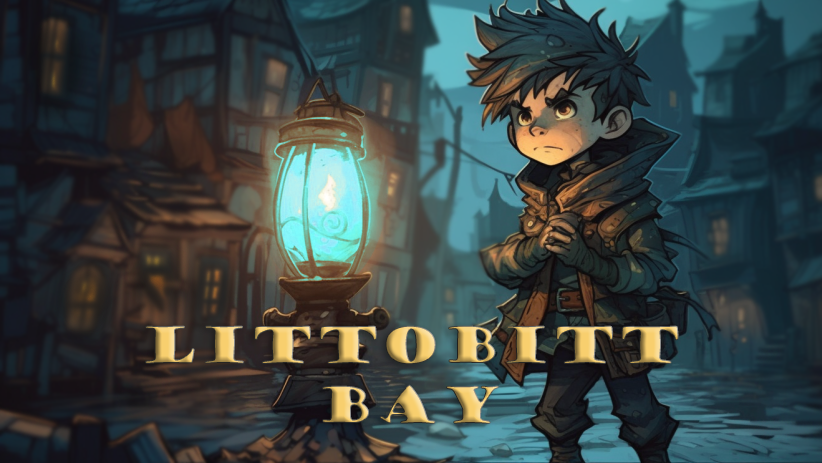
<style>
.page{position:relative;width:822px;height:463px}
.page>*{position:absolute;margin:0}
.t1{font:50px "GoudyStout"}
</style>
<div class="page">
<p class="t1" style="left:145px;top:325px;width:534px;height:99px;text-align:center">LittoBitt <br>Bay</p>
</div>
